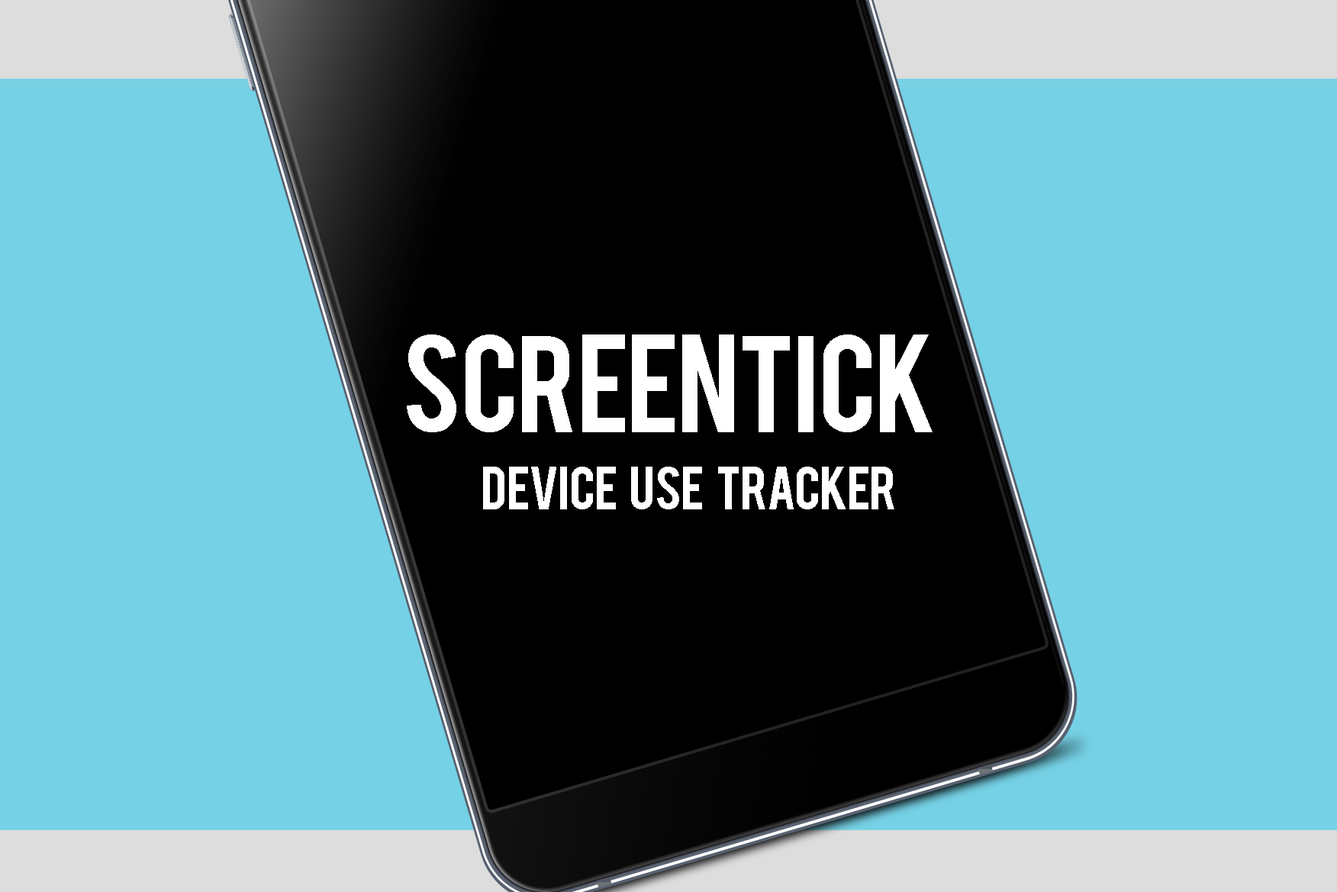
<style>
.page{position:relative;width:1337px;height:892px;background:#75d1e5}
.page>*{position:absolute;margin:0}
.t1{font:107.7px "Bebas";letter-spacing:-0.03em;color:#ffffff;scale:1.04 1}
.t2{font:48.1px "Bebas";letter-spacing:-0.03em;color:#ffffff;scale:1.04 1}
</style>
<div class="page">
<p class="t1" style="left:407px;top:334px;width:526px;height:98px">ScreenTick</p>
<p class="t2" style="left:483px;top:466px;width:412px;height:43px">Device    use    tracker</p>
</div>
